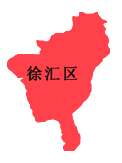
<style>
.page{position:relative;width:122px;height:163px;background:#ffffff}
.page>*{position:absolute;margin:0}
.t1{font:15.7px "NSimSun";letter-spacing:0.12em;color:#0c0c0c;font-weight:bold}
</style>
<div class="page">
<p class="t1" style="left:26px;top:66px;width:52px;height:15px">徐汇区</p>
</div>
